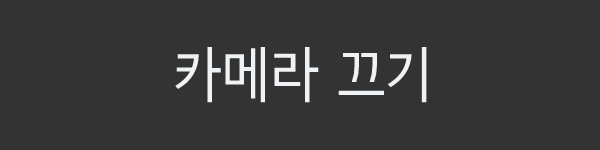
<style>
.page{position:relative;width:600px;height:150px;background:#333333}
.page>*{position:absolute;margin:0}
.t1{font:60px "SeN-CM";color:#eff3f6}
</style>
<div class="page">
<p class="t1" style="left:175px;top:46px;width:252px;height:57px">카메라 끄기</p>
</div>
